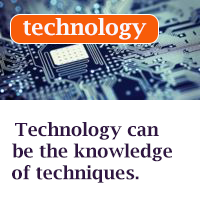
<style>
.page{position:relative;width:200px;height:200px;background:#ffffff}
.page>*{position:absolute;margin:0}
.t1{font:22px "LucidaBright-Demi";color:#f9f8fa}
.t2{font:18px "LucidaBright-Demi";color:#301543}
</style>
<div class="page">
<p class="t1" style="left:23px;top:18px;width:124px;height:22px">technology</p>
<p class="t2" style="left:12px;top:122px;width:160px;height:61px;text-align:center">Technology can <br>         be the knowledge <br>  of techniques.</p>
</div>
